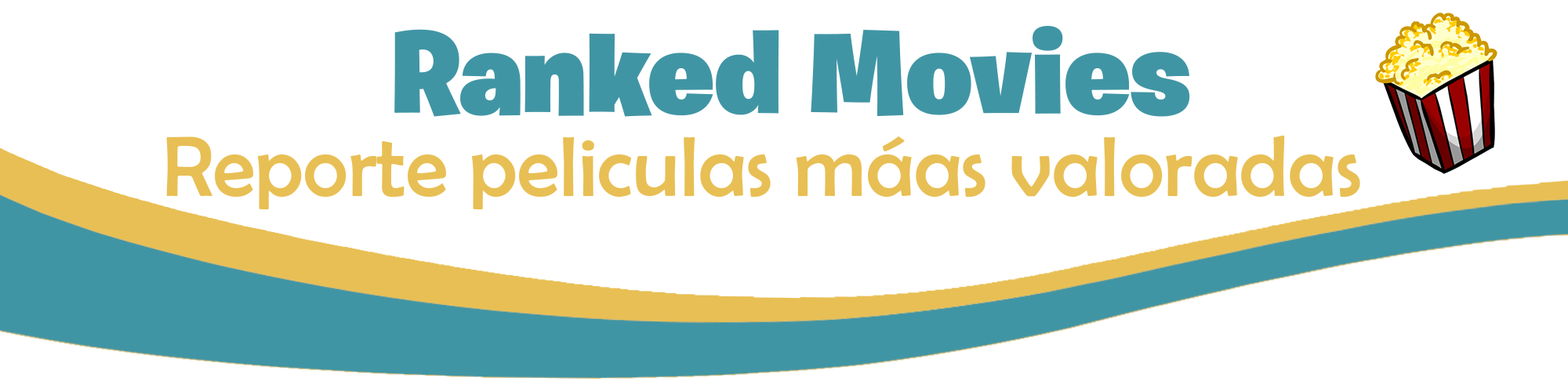
<style>
.page{position:relative;width:1568px;height:392px;background:#ffffff}
.page>*{position:absolute;margin:0}
.t1{font:117.6px "BurbankBigRegular-Black";color:#4095a4}
.t2{font:86.2px "BerlinSansFB-Reg";color:#e8bf54}
</style>
<div class="page">
<p class="t1" style="left:394px;top:26px;width:796px;height:91px">Ranked Movies</p>
<p class="t2" style="left:166px;top:136px;width:1194px;height:73px">Reporte peliculas máas valoradas</p>
</div>
